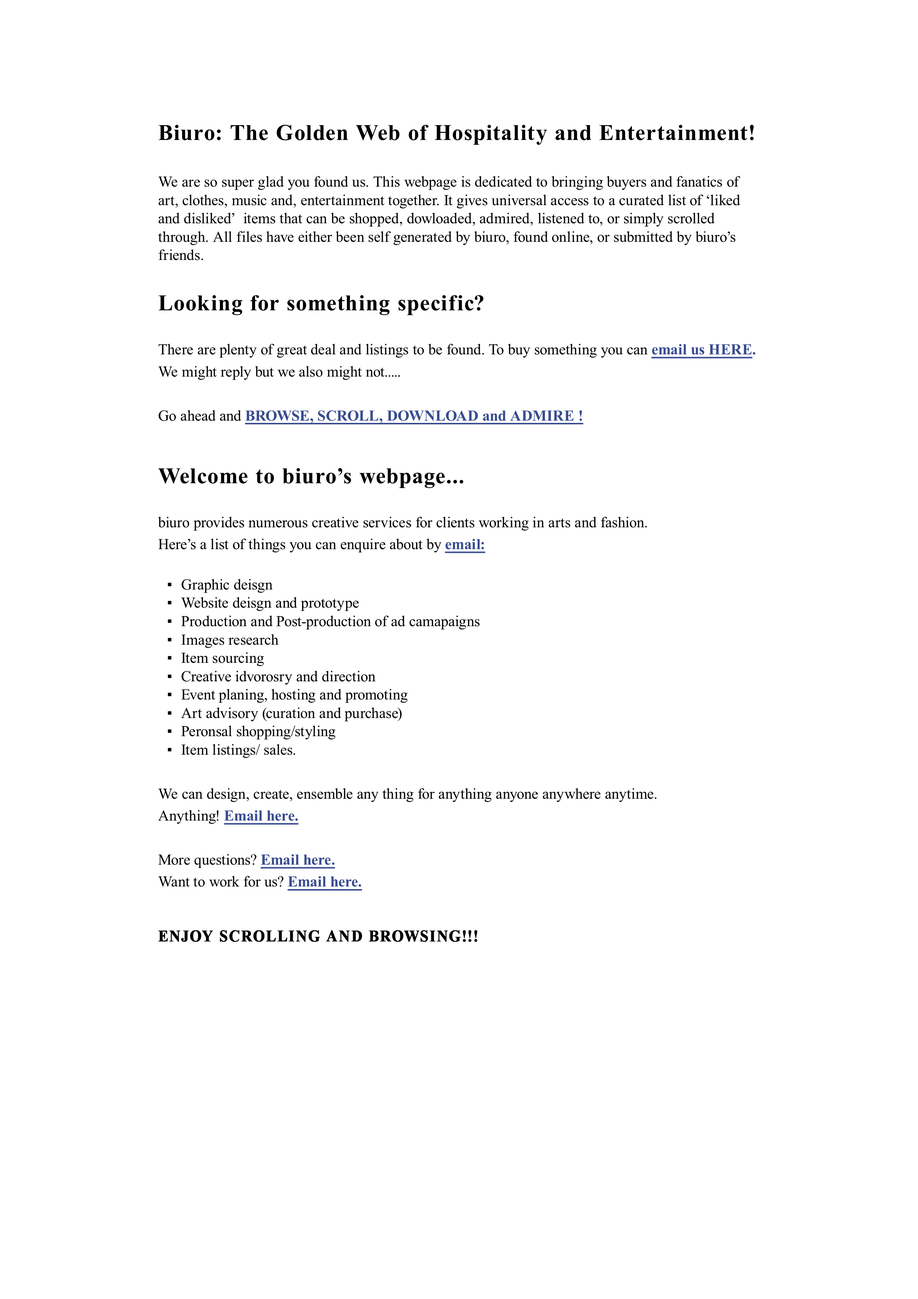
<style>
.page{position:relative;width:918px;height:1299px;background:#ffffff}
.page>*{position:absolute;margin:0}
.t1{font:15.2px/18.3px "TimesNewRomanPSMT";color:#000000}
.t2{font:11.8px "TimesNewRomanPSMT";color:#000000}
.t3{font:22.4px/28.4px "TimesNewRomanPS-BoldMT";letter-spacing:0.04em;color:#000000}
.t4{font:15.2px "TimesNewRomanPSMT";color:#000000}
.t5{font:15.2px "TimesNewRomanPS-BoldMT";color:#394c8f;text-decoration:underline}
.t6{font:15.2px "TimesNewRomanPS-BoldMT";color:#394c8f;text-transform:uppercase;text-decoration:underline}
.t7{font:15.2px "TimesNewRomanPS-BoldMT";color:#394c8f}
.t8{font:16px/7.8px "TimesNewRomanPS-BoldMT";letter-spacing:0.06em;color:#000000;font-weight:bold;scale:0.95 1}
</style>
<div class="page">
<p class="t1" style="left:158px;top:125px;width:598px;height:817px"><span class="t2"><br></span><span class="t3">Biuro: The Golden Web of Hospitality and Entertainment!<br><br></span>We are so super glad you found us. This webpage is dedicated to bringing buyers and fanatics of art, clothes, music and, entertainment together. It gives universal access to a curated list of ‘liked and disliked’  items that can be shopped, dowloaded, admired, listened to, or simply scrolled through. All files have either been self generated by biuro, found online, or submitted by biuro’s friends.<br><br><span class="t3">Looking for something specific? <br></span><span class="t4"><br>There are plenty of great deal and listings to be found. To buy something you can </span><span class="t5">email us </span><span class="t6">here</span><span class="t7">.<br></span><span class="t4">We might reply but we also might not.....<br><br>Go ahead and </span><span class="t5">BROWSE, SCROLL, DOWNLOAD and ADMIRE !<br><br><br></span><span class="t3">Welcome to biuro’s webpage... <br></span><span class="t4"><br>biuro provides numerous creative services for clients working in arts and fashion. <br>Here’s a list of things you can enquire about by </span><span class="t5">email: <br><br></span>Graphic deisgn <br>Website deisgn and prototype<br>Production and Post-production of ad camapaigns <br>Images research <br>Item sourcing <br>Creative idvorosry and direction <br>Event planing, hosting and promoting <br>Art advisory (curation and purchase) <br>Peronsal shopping/styling <br>Item listings/ sales. <br><span class="t4"><br>We can design, create, ensemble any thing for anything anyone anywhere anytime.<br>Anything! </span><span class="t5">Email here.<br></span><span class="t4"><br>More questions? </span><span class="t5">Email here.<br></span><span class="t4">Want to work for us? </span><span class="t5">Email here.<br><br><br><br><br><br><br></span><span class="t8">ENJOY SCROLLING AND BROWSING!!!</span></p>
</div>
